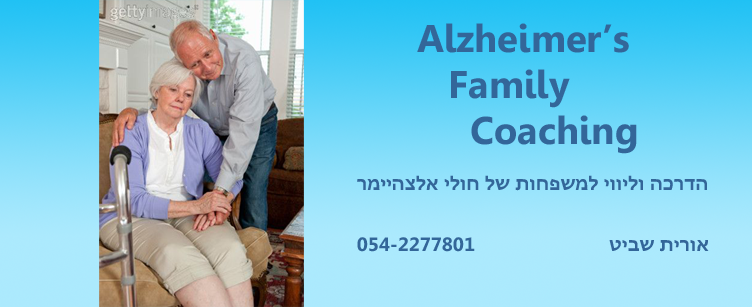
<style>
.page{position:relative;width:752px;height:307px}
.page>*{position:absolute;margin:0}
.t1{font:38.4px "Gisha-Bold";color:#336699}
.t2{font:19.2px "Gisha-Bold";color:#336699}
</style>
<div class="page">
<p class="t1" style="left:417px;top:23px;width:220px;height:131px">Alzheimer’s <br>   Family <br>     Coaching</p>
<p class="t2" style="left:357px;top:175px;width:350px;height:16px">רמייהצלא ילוח לש תוחפשמל יווילו הכרדה</p>
<p class="t2" style="left:357px;top:237px;width:118px;height:15px">054-2277801</p>
<p class="t2" style="left:609px;top:240px;width:100px;height:12px">טיבש תירוא</p>
</div>
